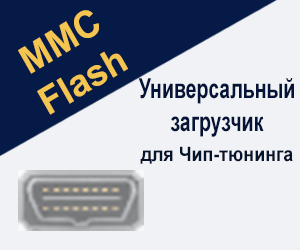
<style>
.page{position:relative;width:300px;height:250px;background:#f0f2f5}
.page>*{position:absolute;margin:0}
.t1{font:37.7px "Arial-BoldMT";color:#f4c651}
.t2{font:27.6px "Arial-BoldMT";color:#041438;scale:0.71 1}
.t3{font:19.7px "Arial-BoldMT";color:#03142c;scale:0.91 1}
</style>
<div class="page">
<p class="t1" style="left:18px;top:10px;width:110px;height:105px;text-align:center;rotate:-31deg">MMC<br>Flash</p>
<p class="t2" style="left:138px;top:78px;width:156px;height:59px;text-align:center">Универсальный загрузчик</p>
<p class="t3" style="left:140px;top:146px;width:153px;height:18px">для Чип-тюнинга</p>
</div>
